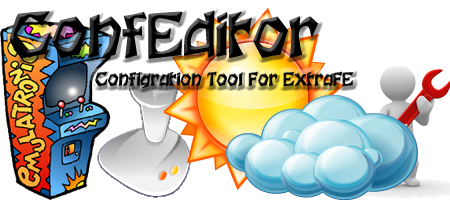
<style>
.page{position:relative;width:450px;height:200px;background:#ffffff}
.page>*{position:absolute;margin:0}
.t1{font:60px "WoodcutNormal";color:#000000}
.t2{font:18px "WoodcutNormal";color:#000000}
</style>
<div class="page">
<p class="t1" style="left:9px;top:10px;width:309px;height:49px">ConfEditor</p>
<p class="t2" style="left:95px;top:71px;width:258px;height:17px">Configration Tool For ExtraFE</p>
</div>
